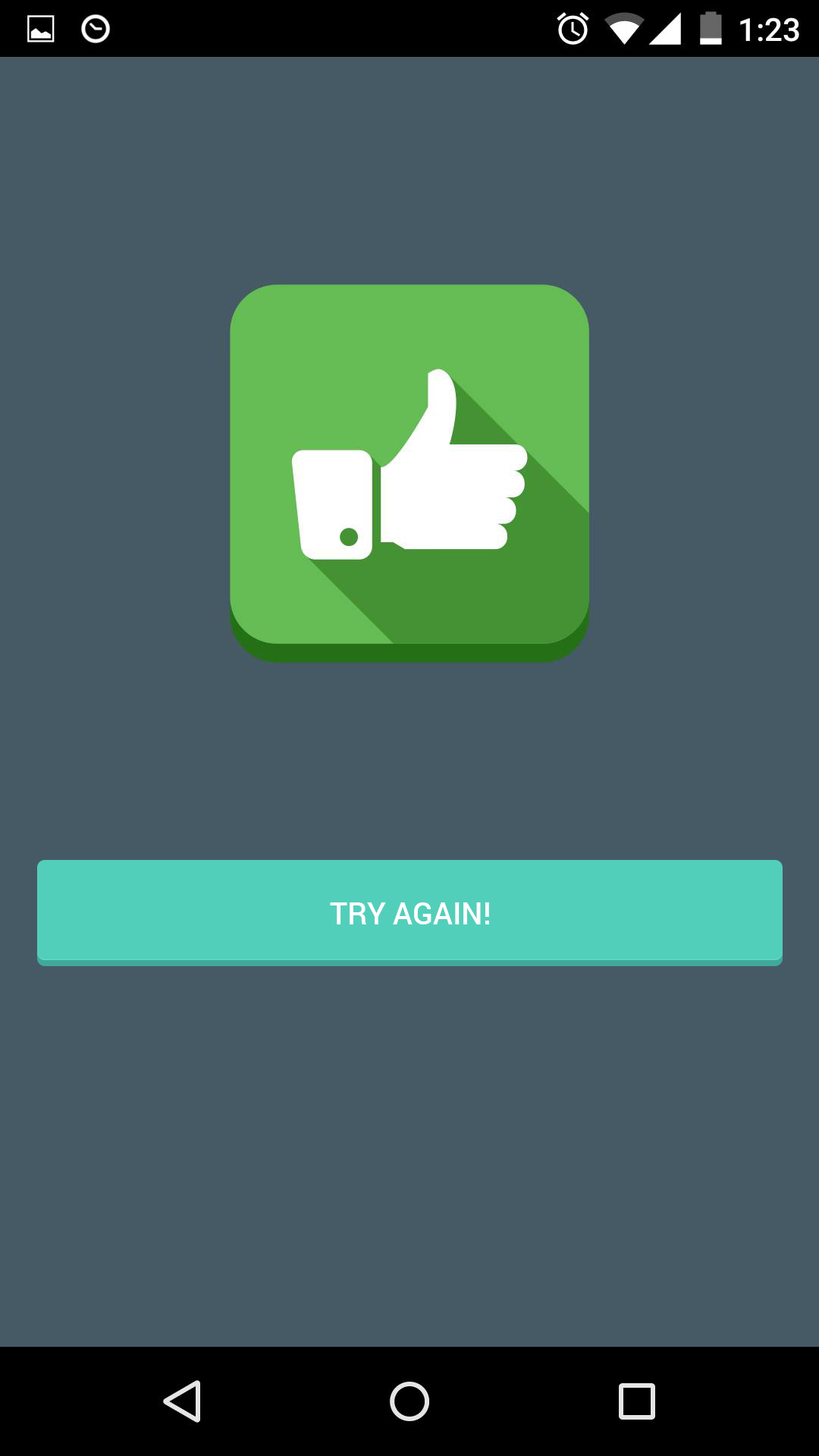
<style>
.page{position:relative;width:819px;height:1456px;background:#465a65}
.page>*{position:absolute;margin:0}
.t1{font:30.3px "Roboto-Medium";color:#ffffff}
</style>
<div class="page">
<p class="t1" style="left:330px;top:902px;width:159px;height:22px">TRY AGAIN!</p>
</div>
